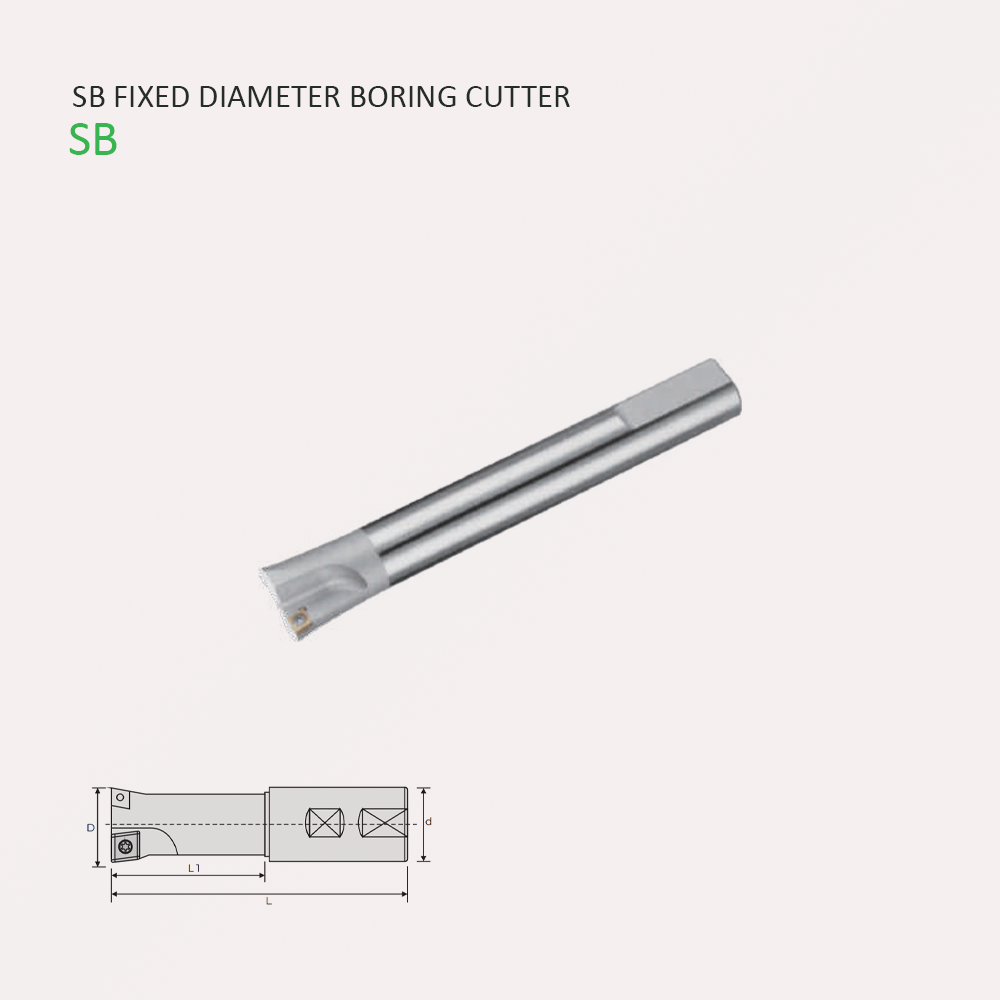
<style>
.page{position:relative;width:1000px;height:1000px;background:#f5efef}
.page>*{position:absolute;margin:0}
.t1{font:33.2px "Calibri";color:#262d27}
.t2{font:51px "Calibri";color:#38b550}
</style>
<div class="page">
<p class="t1" style="left:73px;top:86px;width:497px;height:21px">SB FIXED DIAMETER BORING CUTTER</p>
<p class="t2" style="left:69px;top:123px;width:48px;height:32px">SB</p>
</div>
